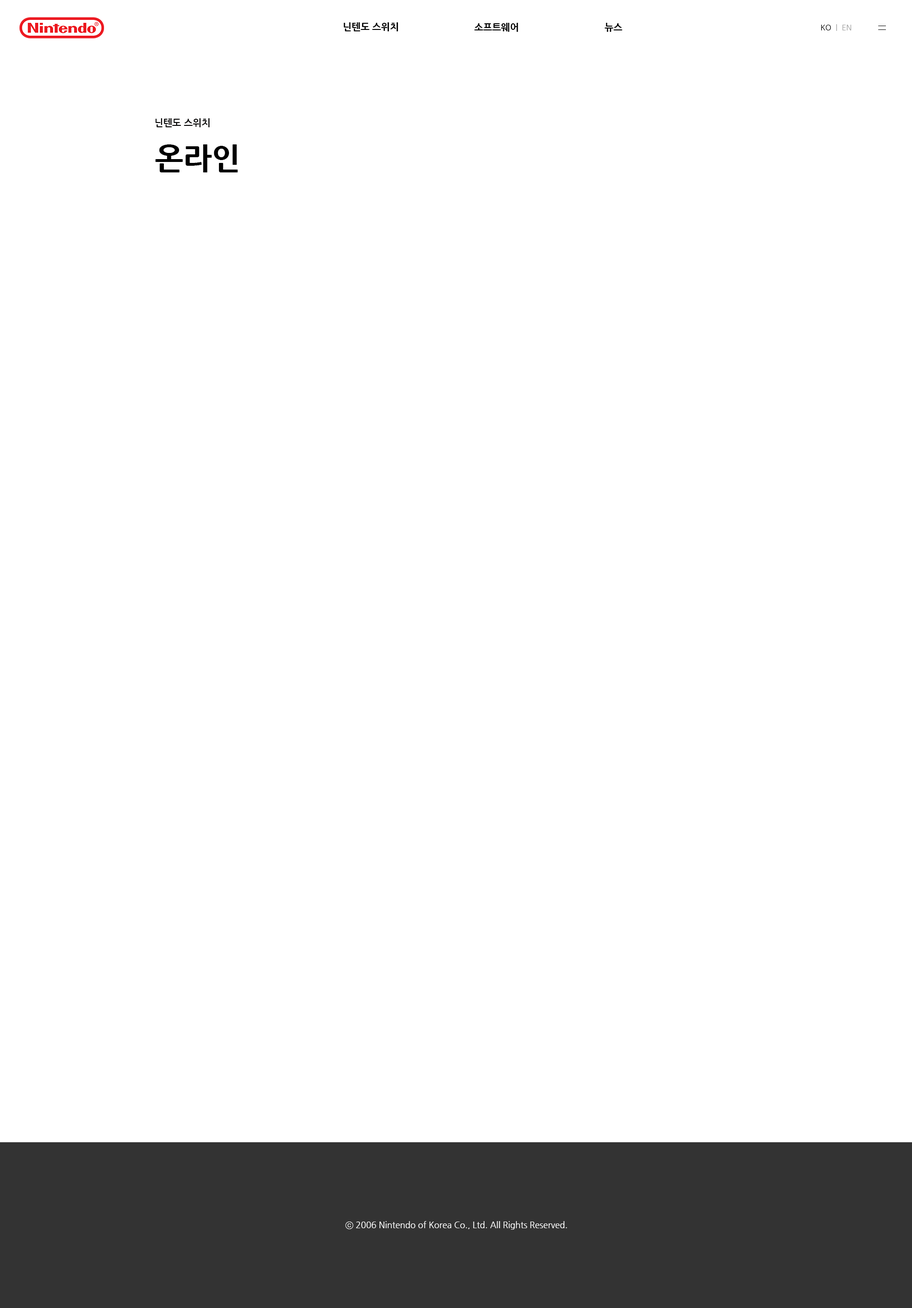
<style>
.page{position:relative;width:912px;height:1308px;background:#ffffff}
.page>*{position:absolute;margin:0}
.t1{font:9.5px "NanumGothicExtraBold";color:#000000}
.t2{font:7.6px "NanumGothic";color:#000000}
.t3{font:7.6px "NanumGothic";color:#a3a3a3}
.t4{font:9.5px "NanumGothicBold";color:#010000}
.t5{font:30.4px "NanumGothicExtraBold";color:#000000}
.t6{font:8.5px "NanumGothic";color:#ffffff}
</style>
<div class="page">
<p class="t1" style="left:343px;top:22px;width:55px;height:9px">닌텐도 스위치</p>
<p class="t1" style="left:474px;top:23px;width:44px;height:9px">소프트웨어</p>
<p class="t1" style="left:605px;top:23px;width:17px;height:9px">뉴스</p>
<p class="t2" style="left:821px;top:25px;width:10px;height:5px">KO</p>
<p class="t3" style="left:836px;top:24px;width:15px;height:7px">|  EN</p>
<p class="t4" style="left:155px;top:118px;width:54px;height:9px">닌텐도 스위치</p>
<p class="t5" style="left:155px;top:144px;width:83px;height:28px">온라인</p>
<p class="t6" style="left:345px;top:1221px;width:222px;height:8px">ⓒ 2006 Nintendo of Korea Co., Ltd. All Rights Reserved.</p>
</div>
